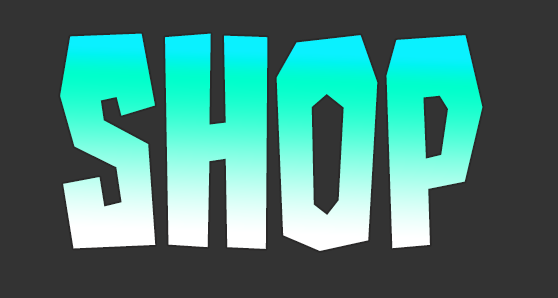
<style>
.page{position:relative;width:558px;height:298px;background:#333333}
.page>*{position:absolute;margin:0}
.t1{font:258.1px "Kaiju-Monster__G"}
</style>
<div class="page">
<p class="t1" style="left:60px;top:33px;width:423px;height:218px">Shop</p>
</div>
